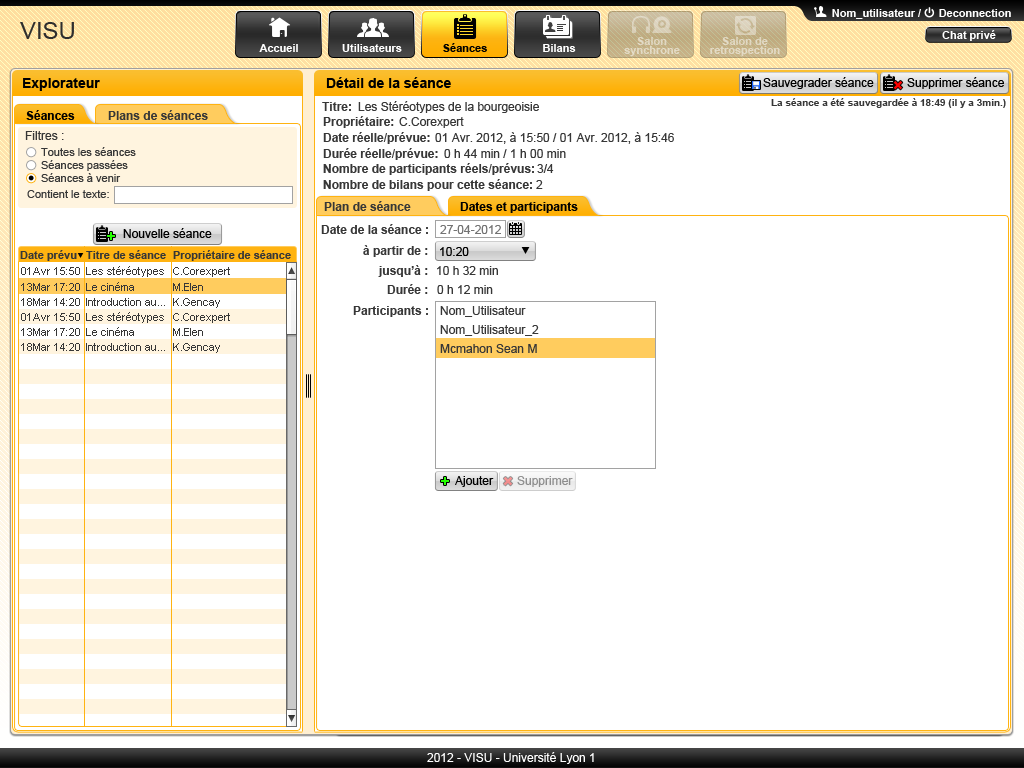
<style>
.page{position:relative;width:1024px;height:768px;background:#ffffff}
.page>*{position:absolute;margin:0}
.t1{font:11px "Arial-BoldMT";color:#ffffff}
.t2{font:24px "ArialMT";color:#2e2e2e}
.t3{font:11px/9px "Arial-BoldMT";color:#e3d8c2}
.t4{font:11px/9px "Arial-BoldMT";color:#e2d7c2}
.t5{font:11px "Arial-BoldMT";color:#000000}
.t6{font:14px "Arial-BoldMT";color:#000000}
.t7{font:12px "ArialMT";color:#000000}
.t8{font:19.3px "Arial-BoldMT";color:#ff0000}
.t9{font:12px "Arial-BoldMT";color:#373737}
.t10{font:12px "ArialMT";color:#373737}
.t11{font:10px "Arial-BoldMT";color:#373737}
.t12{font:12px "Arial-BoldMT";color:#000000}
.t13{font:11px "ArialMT";color:#373737}
.t14{font:14px "Arial-BoldMT";color:#24ff00}
.t15{font:12px "ArialMT";color:#737373}
.t16{font:11px "Arial-BoldMT";color:#373737}
.t17{font:12px "ArialMT";color:#010101}
.t18{font:19.3px "Arial-BoldMT";color:#f48e8e}
.t19{font:12px "ArialMT";color:#8e8e8e}
.t20{font:12px "ArialMT";color:#fefefe}
</style>
<div class="page">
<p class="t1" style="left:832px;top:9px;width:89px;height:10px">Nom_utilisateur /</p>
<p class="t1" style="left:939px;top:9px;width:72px;height:8px">Deconnection</p>
<p class="t2" style="left:20px;top:22px;width:54px;height:17px">VISU</p>
<p class="t1" style="left:942px;top:30px;width:54px;height:11px">Chat privé</p>
<p class="t3" style="left:624px;top:37px;width:56px;height:19px;text-align:center">Salon<br>synchrone</p>
<p class="t4" style="left:710px;top:37px;width:70px;height:19px;text-align:center">Salon de<br>retrospection</p>
<p class="t1" style="left:259px;top:44px;width:39px;height:8px">Accueil</p>
<p class="t1" style="left:342px;top:44px;width:60px;height:8px">Utilisateurs</p>
<p class="t5" style="left:443px;top:43px;width:44px;height:9px">Séances</p>
<p class="t1" style="left:543px;top:44px;width:33px;height:8px">Bilans</p>
<p class="t6" style="left:23px;top:78px;width:77px;height:13px">Explorateur</p>
<p class="t6" style="left:326px;top:77px;width:125px;height:11px">Détail de la séance</p>
<p class="t7" style="left:763px;top:77px;width:111px;height:12px">Sauvegrader séance</p>
<p class="t7" style="left:907px;top:77px;width:97px;height:12px">Supprimer séance</p>
<p class="t8" style="left:893px;top:81px;width:10px;height:9px;rotate:-45deg">+</p>
<p class="t9" style="left:322px;top:102px;width:29px;height:9px">Titre:</p>
<p class="t10" style="left:358px;top:101px;width:181px;height:12px">Les Stéréotypes de la bourgeoisie</p>
<p class="t11" style="left:771px;top:98px;width:235px;height:10px">La séance a été sauvegardée à 18:49 (il y a 3min.)</p>
<p class="t12" style="left:26px;top:110px;width:49px;height:10px">Séances</p>
<p class="t9" style="left:108px;top:110px;width:100px;height:10px">Plans de séances</p>
<p class="t9" style="left:323px;top:116px;width:71px;height:12px">Propriétaire:</p>
<p class="t10" style="left:399px;top:117px;width:65px;height:11px">C.Corexpert</p>
<p class="t10" style="left:25px;top:131px;width:39px;height:9px">Filtres :</p>
<p class="t9" style="left:323px;top:132px;width:107px;height:12px">Date réelle/prévue:</p>
<p class="t10" style="left:435px;top:132px;width:239px;height:12px">01 Avr. 2012, à 15:50 / 01 Avr. 2012, à 15:46</p>
<p class="t13" style="left:41px;top:147px;width:95px;height:9px">Toutes les séances</p>
<p class="t9" style="left:323px;top:148px;width:115px;height:12px">Durée réelle/prévue:</p>
<p class="t10" style="left:444px;top:149px;width:122px;height:9px">0 h 44 min / 1 h 00 min</p>
<p class="t13" style="left:41px;top:160px;width:87px;height:11px">Séances passées</p>
<p class="t13" style="left:41px;top:173px;width:80px;height:9px">Séances à venir</p>
<p class="t9" style="left:323px;top:163px;width:211px;height:12px">Nombre de participants réels/prévus:</p>
<p class="t10" style="left:537px;top:164px;width:17px;height:9px">3/4</p>
<p class="t9" style="left:323px;top:179px;width:209px;height:12px">Nombre de bilans pour cette séance:</p>
<p class="t10" style="left:536px;top:180px;width:7px;height:9px">2</p>
<p class="t13" style="left:27px;top:190px;width:82px;height:8px">Contient le texte:</p>
<p class="t9" style="left:324px;top:201px;width:87px;height:10px">Plan de séance</p>
<p class="t12" style="left:460px;top:202px;width:118px;height:11px">Dates et participants</p>
<p class="t14" style="left:107px;top:232px;width:8px;height:8px">+</p>
<p class="t7" style="left:123px;top:228px;width:89px;height:10px">Nouvelle séance</p>
<p class="t9" style="left:321px;top:224px;width:107px;height:10px">Date de la séance :</p>
<p class="t15" style="left:440px;top:225px;width:61px;height:9px">27-04-2012</p>
<p class="t9" style="left:363px;top:245px;width:65px;height:12px">à partir de :</p>
<p class="t16" style="left:20px;top:250px;width:57px;height:11px">Date prévu</p>
<p class="t16" style="left:86px;top:250px;width:80px;height:9px">Titre de séance</p>
<p class="t16" style="left:173px;top:250px;width:118px;height:11px">Propriétaire de séance</p>
<p class="t17" style="left:440px;top:247px;width:29px;height:9px">10:20</p>
<p class="t13" style="left:21px;top:267px;width:59px;height:8px">01Avr 15:50</p>
<p class="t13" style="left:86px;top:266px;width:78px;height:11px">Les stéréotypes</p>
<p class="t13" style="left:173px;top:267px;width:57px;height:10px">C.Corexpert</p>
<p class="t9" style="left:378px;top:265px;width:50px;height:12px">jusqu’à :</p>
<p class="t10" style="left:437px;top:266px;width:61px;height:9px">10 h 32 min</p>
<p class="t13" style="left:21px;top:283px;width:59px;height:8px">13Mar 17:20</p>
<p class="t13" style="left:86px;top:282px;width:48px;height:9px">Le cinéma</p>
<p class="t13" style="left:173px;top:283px;width:30px;height:8px">M.Elen</p>
<p class="t9" style="left:387px;top:284px;width:41px;height:10px">Durée :</p>
<p class="t10" style="left:437px;top:285px;width:56px;height:9px">0 h 12 min</p>
<p class="t13" style="left:21px;top:298px;width:59px;height:8px">18Mar 14:20</p>
<p class="t13" style="left:86px;top:298px;width:79px;height:8px">Introduction au...</p>
<p class="t13" style="left:173px;top:298px;width:47px;height:10px">K.Gencay</p>
<p class="t13" style="left:21px;top:313px;width:59px;height:8px">01Avr 15:50</p>
<p class="t13" style="left:86px;top:312px;width:78px;height:11px">Les stéréotypes</p>
<p class="t13" style="left:173px;top:313px;width:57px;height:10px">C.Corexpert</p>
<p class="t9" style="left:353px;top:306px;width:75px;height:11px">Participants :</p>
<p class="t10" style="left:440px;top:306px;width:86px;height:11px">Nom_Utilisateur</p>
<p class="t13" style="left:21px;top:328px;width:59px;height:8px">13Mar 17:20</p>
<p class="t13" style="left:86px;top:327px;width:48px;height:9px">Le cinéma</p>
<p class="t13" style="left:173px;top:328px;width:30px;height:8px">M.Elen</p>
<p class="t10" style="left:440px;top:325px;width:99px;height:11px">Nom_Utilisateur_2</p>
<p class="t13" style="left:21px;top:343px;width:59px;height:8px">18Mar 14:20</p>
<p class="t13" style="left:86px;top:343px;width:79px;height:8px">Introduction au...</p>
<p class="t13" style="left:173px;top:343px;width:47px;height:10px">K.Gencay</p>
<p class="t10" style="left:440px;top:344px;width:97px;height:9px">Mcmahon Sean M</p>
<p class="t14" style="left:441px;top:477px;width:8px;height:8px">+</p>
<p class="t17" style="left:455px;top:476px;width:39px;height:11px">Ajouter</p>
<p class="t18" style="left:503px;top:477px;width:10px;height:9px;rotate:-45deg">+</p>
<p class="t19" style="left:517px;top:476px;width:56px;height:11px">Supprimer</p>
<p class="t20" style="left:427px;top:752px;width:167px;height:12px">2012 - VISU - Université Lyon 1</p>
</div>
